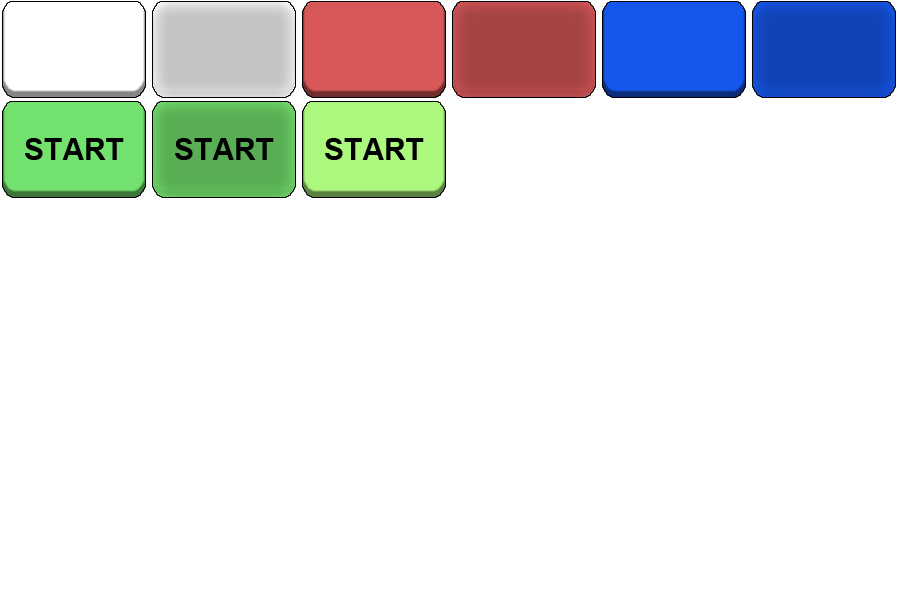
<style>
.page{position:relative;width:900px;height:600px;background:#ffffff}
.page>*{position:absolute;margin:0}
.t1{font:30px "Arial-BoldMT";color:#000000}
</style>
<div class="page">
<p class="t1" style="left:25px;top:138px;width:99px;height:22px">START</p>
<p class="t1" style="left:175px;top:138px;width:99px;height:22px">START</p>
<p class="t1" style="left:325px;top:138px;width:99px;height:22px">START</p>
</div>
